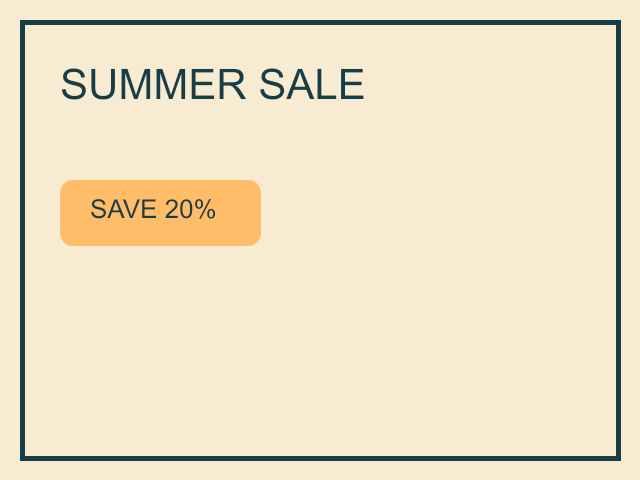
<style>
.page{position:relative;width:640px;height:480px;background:#f7ebd2}
.page>*{position:absolute;margin:0}
.t1{font:42px "ArialMT";color:#173e46}
.t2{font:26px "ArialMT";color:#173e46}
</style>
<div class="page">
<p class="t1" style="left:60px;top:68px;width:305px;height:33px">SUMMER SALE</p>
<p class="t2" style="left:90px;top:199px;width:127px;height:21px">SAVE 20%</p>
</div>
